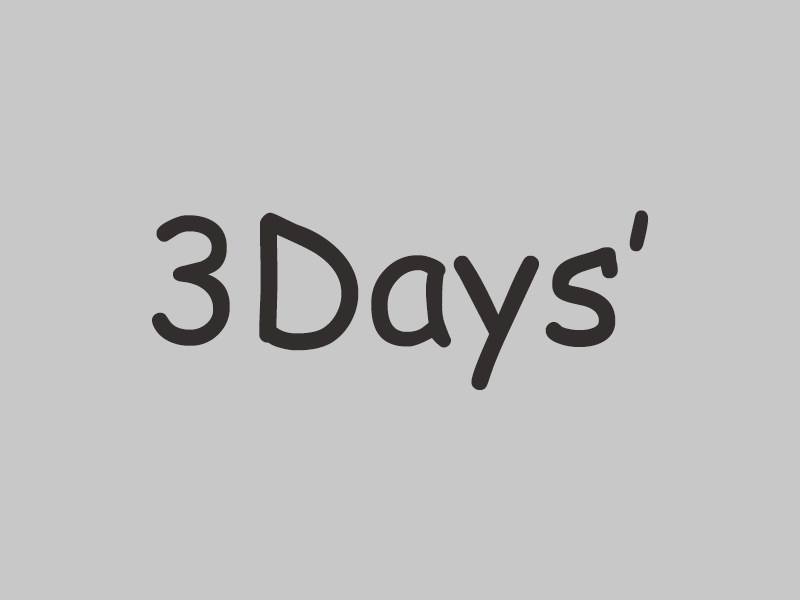
<style>
.page{position:relative;width:800px;height:600px;background:#c8c8c8}
.page>*{position:absolute;margin:0}
.t1{font:170px "ComicSansMS";color:#332e2e}
</style>
<div class="page">
<p class="t1" style="left:151px;top:210px;width:498px;height:180px">3Days’</p>
</div>
